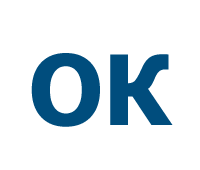
<style>
.page{position:relative;width:200px;height:170px;background:#ffffff}
.page>*{position:absolute;margin:0}
.t1{font:97px "Tahoma-Bold";color:#004d7d}
</style>
<div class="page">
<p class="t1" style="left:31px;top:53px;width:142px;height:74px">ОК</p>
</div>
